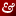
<style>
.page{position:relative;width:16px;height:16px}
.page>*{position:absolute;margin:0}
.t1{font:15px "ACaslonPro-BoldItalic";letter-spacing:-0.06em;color:#ffffff}
</style>
<div class="page">
<p class="t1" style="left:2px;top:2px;width:13px;height:11px">&amp;</p>
</div>
